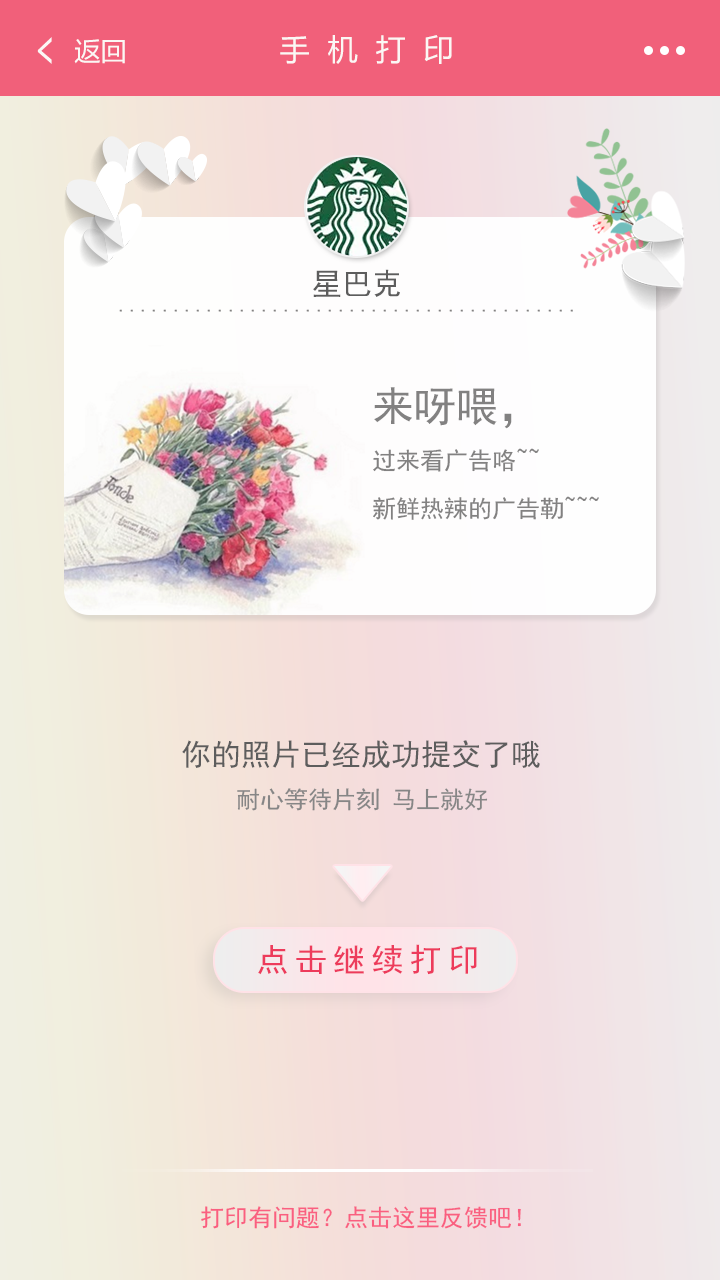
<style>
.page{position:relative;width:720px;height:1280px}
.page>*{position:absolute;margin:0}
.t1{font:52.5px "MicrosoftYaHei";color:#fbf7f5;scale:0.57 1}
.t2{font:26px "MicrosoftYaHei";color:#fbf7f5}
.t3{font:30px "MicrosoftYaHei";letter-spacing:0.6em;color:#fbf7f5}
.t4{font:30px "SimHei";color:#5d5d5d}
.t5{font:22px "SimHei";color:#828181}
.t6{font:24px/48px "SimHei";color:#828181}
.t7{font:42px/48px "SimHei";color:#828181}
.t8{font:48px/48px "SimHei";color:#828181}
.t9{font:24px "SimHei";color:#868686}
.t10{font:32px "SimHei";letter-spacing:0.2em;color:#ed3b5b}
.t11{font:24px "SimHei";color:#fa5f80}
</style>
<div class="page">
<p class="t1" style="left:37px;top:37px;width:15px;height:27px">&lt;</p>
<p class="t2" style="left:74px;top:39px;width:51px;height:25px">返回</p>
<p class="t3" style="left:280px;top:35px;width:172px;height:29px">手机打印</p>
<p class="t4" style="left:313px;top:269px;width:87px;height:28px">星巴克</p>
<p class="t5" style="left:119px;top:309px;width:454px;height:3px">..........................................</p>
<p class="t6" style="left:373px;top:387px;width:226px;height:133px"><span class="t7">来呀喂</span><span class="t8">，<br></span>过来看广告咯~~<br>新鲜热辣的广告勒~~~</p>
<p class="t4" style="left:182px;top:740px;width:358px;height:28px">你的照片已经成功提交了哦</p>
<p class="t9" style="left:237px;top:788px;width:251px;height:23px">耐心等待片刻 马上就好</p>
<p class="t10" style="left:258px;top:944px;width:219px;height:31px">点击继续打印</p>
<p class="t11" style="left:201px;top:1206px;width:320px;height:23px">打印有问题？点击这里反馈吧！</p>
</div>
